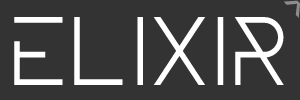
<style>
.page{position:relative;width:300px;height:100px;background:#333333}
.page>*{position:absolute;margin:0}
.t1{font:41.9px "MyriadPro-BoldIt";letter-spacing:0.025em;color:#8b8c8b;scale:0.54 1}
.t2{font:97.4px "VisionDemo-Bold";letter-spacing:0.025em;color:#ffffff;scale:0.95 1}
</style>
<div class="page">
<p class="t1" style="left:283px;top:0px;width:17px;height:18px;rotate:-46deg">&gt;</p>
<p class="t2" style="left:14px;top:17px;width:270px;height:68px">ELIXIR</p>
</div>
